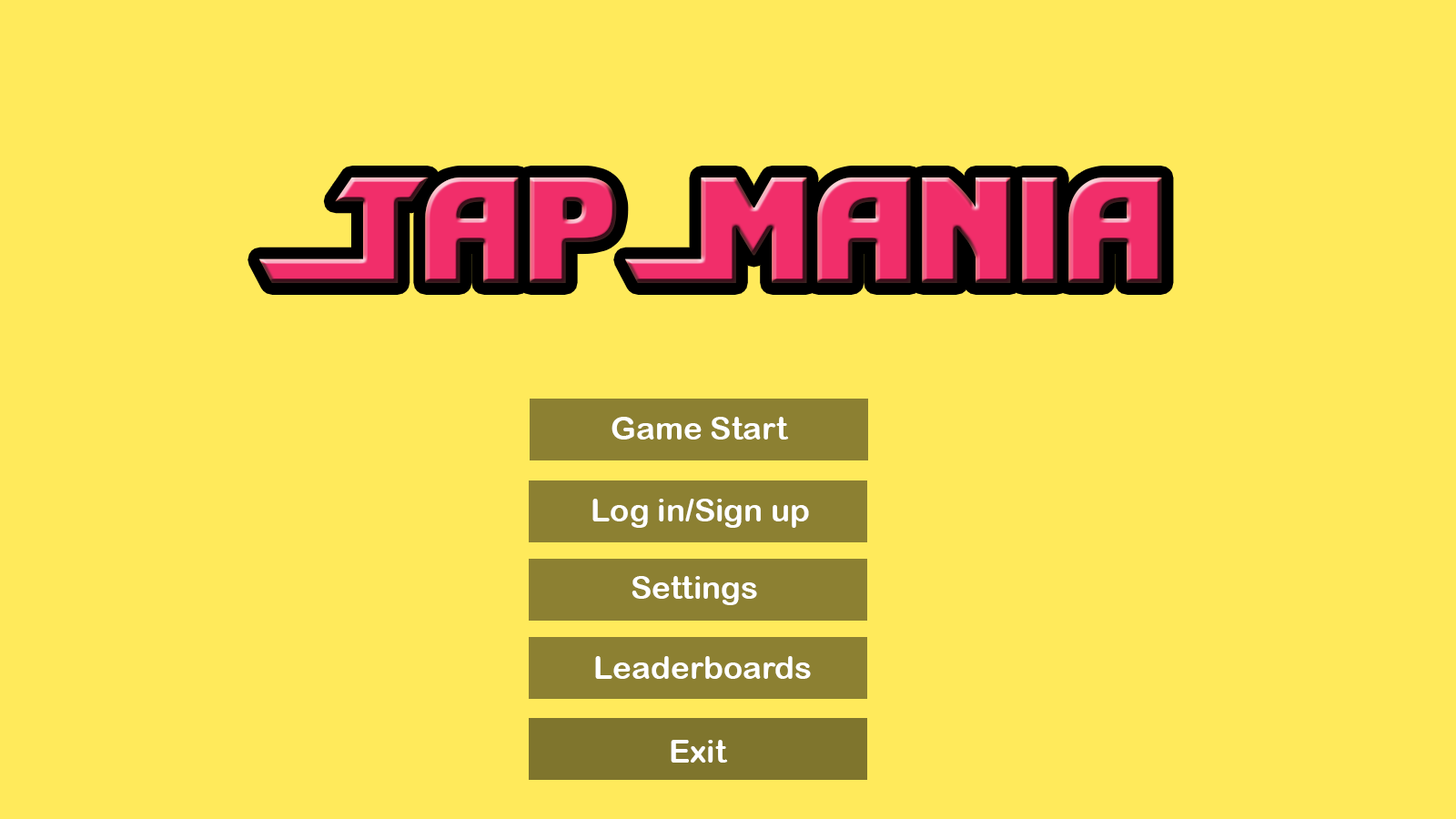
<style>
.page{position:relative;width:1456px;height:819px;background:#ffea5b}
.page>*{position:absolute;margin:0}
.t1{font:182px "ShiningHerald";color:#f12e6a}
.t2{font:31.8px "ArialRoundedMTBold";color:#ffffff}
</style>
<div class="page">
<p class="t1" style="left:259px;top:177px;width:903px;height:106px">TapMania</p>
<p class="t2" style="left:612px;top:417px;width:177px;height:23px">Game Start</p>
<p class="t2" style="left:592px;top:499px;width:217px;height:29px">Log in/Sign up</p>
<p class="t2" style="left:632px;top:576px;width:125px;height:29px">Settings</p>
<p class="t2" style="left:595px;top:656px;width:216px;height:23px">Leaderboards</p>
<p class="t2" style="left:671px;top:740px;width:57px;height:23px">Exit</p>
</div>
